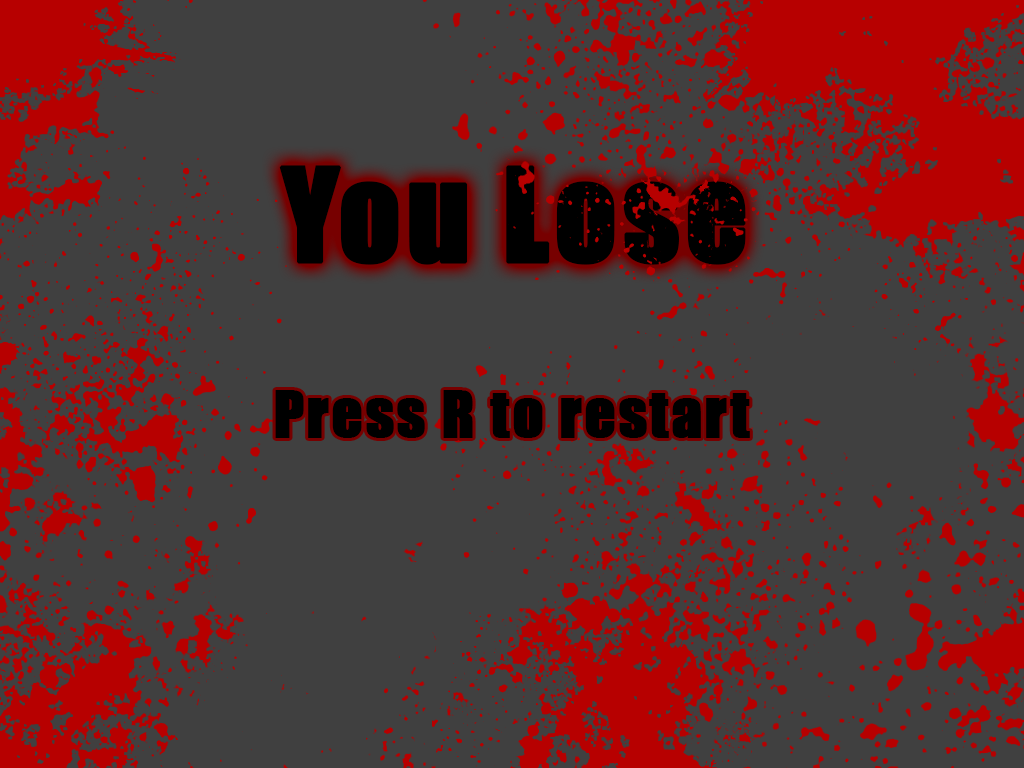
<style>
.page{position:relative;width:1024px;height:768px;background:#404040}
.page>*{position:absolute;margin:0}
.t1{font:120px "Impact";letter-spacing:0.025em;color:#000000;font-weight:bold}
.t2{font:60.4px "Impact";letter-spacing:0.025em;color:#000000;font-weight:bold}
</style>
<div class="page">
<p class="t1" style="left:279px;top:165px;width:467px;height:100px">You Lose</p>
<p class="t2" style="left:275px;top:390px;width:475px;height:48px">Press R to restart</p>
</div>
